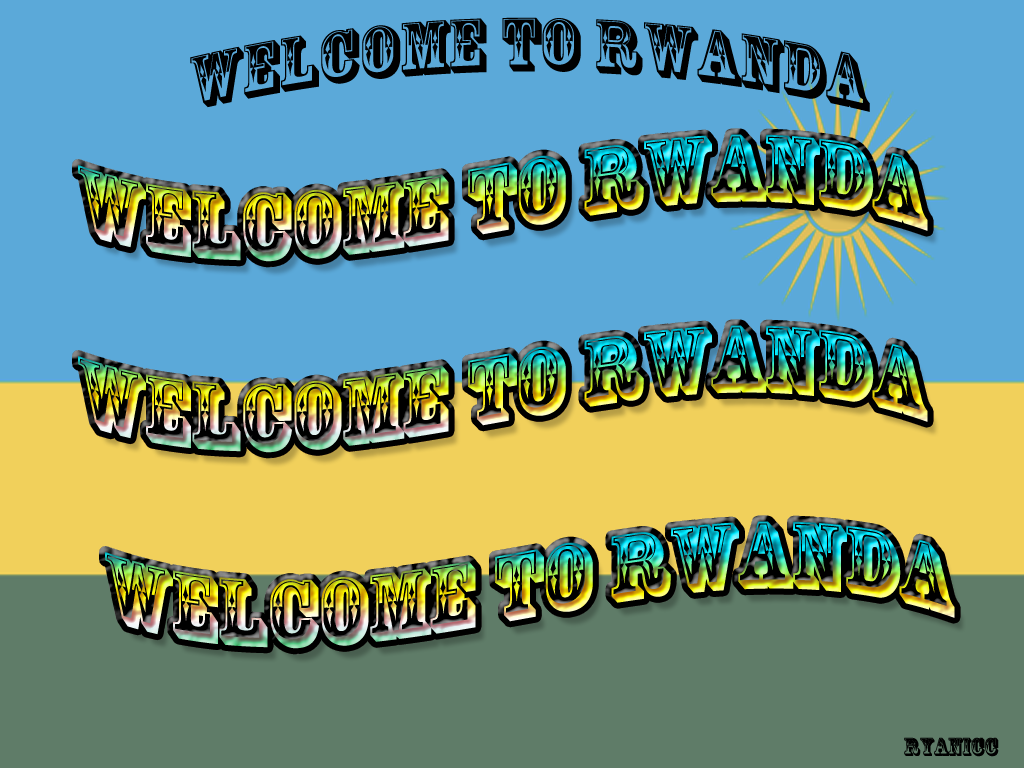
<style>
.page{position:relative;width:1024px;height:768px;background:#5ba9d9}
.page>*{position:absolute;margin:0}
.t1{font:72px "RosewoodStd-Regular";color:#000000}
.t2{font:90px "RosewoodStd-Regular"}
.t3{font:24px "RosewoodStd-Regular";color:#000000}
</style>
<div class="page">
<p class="t1" style="left:190px;top:17px;width:680px;height:95px">welcome to rwanda</p>
<p class="t2" style="left:78px;top:134px;width:850px;height:128px">welcome to rwanda</p>
<p class="t2" style="left:78px;top:325px;width:850px;height:128px">welcome to rwanda</p>
<p class="t2" style="left:105px;top:521px;width:850px;height:128px">welcome to rwanda</p>
<p class="t3" style="left:904px;top:737px;width:95px;height:20px">RYANICC</p>
</div>
